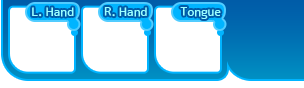
<style>
.page{position:relative;width:304px;height:88px;background:#ffffff}
.page>*{position:absolute;margin:0}
.t1{font:12px "JK-Gothic-M";color:#9dfffe}
</style>
<div class="page">
<p class="t1" style="left:32px;top:7px;width:42px;height:10px">L. Hand</p>
<p class="t1" style="left:104px;top:7px;width:43px;height:10px">R. Hand</p>
<p class="t1" style="left:180px;top:7px;width:41px;height:12px">Tongue</p>
</div>
